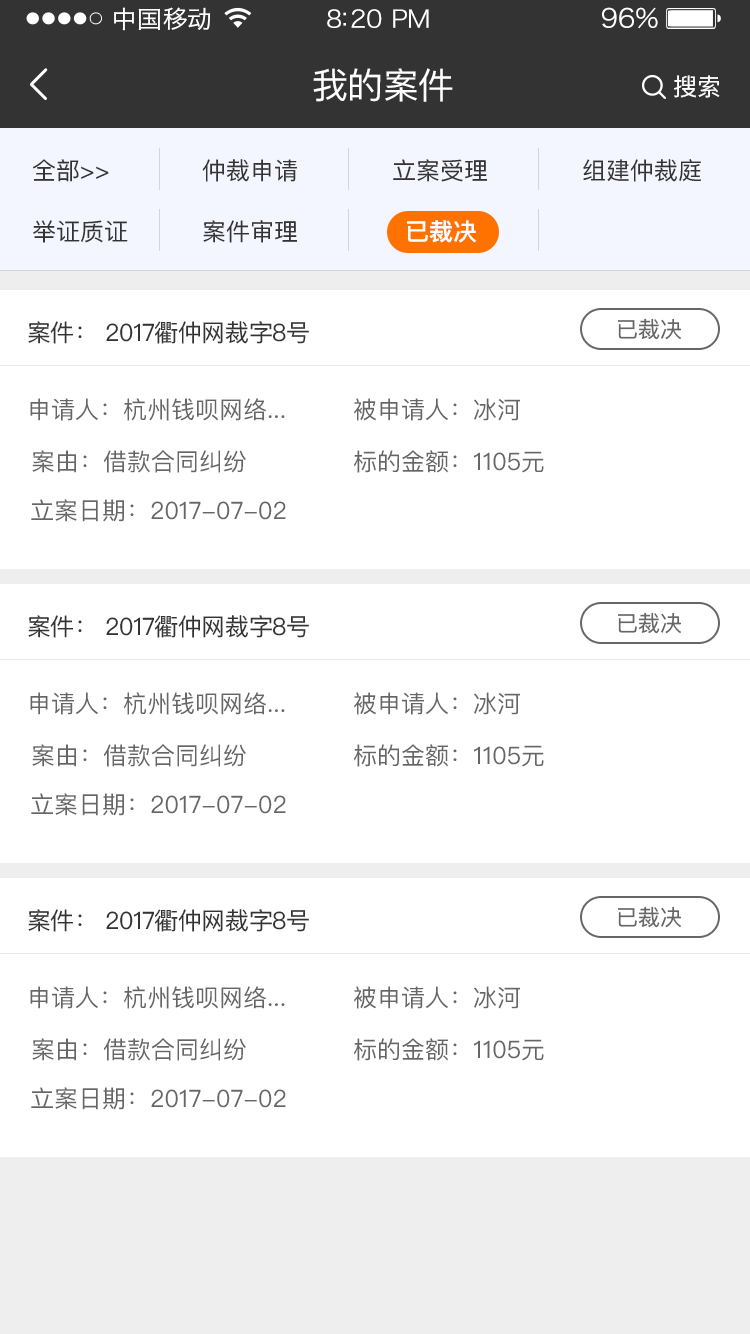
<style>
.page{position:relative;width:750px;height:1334px;background:#ffffff}
.page>*{position:absolute;margin:0}
.t1{font:24px "HiraginoSansGB-W3";letter-spacing:0.02em;color:#ffffff;scale:1.03 1}
.t2{font:24px "HiraginoSansGB-W3";letter-spacing:-0.02em;color:#ffffff;scale:1.03 1}
.t3{font:26.2px "HiraginoSansGB-W3";letter-spacing:-0.02em;color:#ffffff;scale:1.03 1}
.t4{font:36px "PingFangSC-Regular";letter-spacing:-0.02em;color:#ffffff}
.t5{font:24px "PingFangSC-Regular";letter-spacing:-0.02em;color:#ffffff}
.t6{font:24px "PingFangSC-Regular";color:#333333}
.t7{font:24px "PingFangSC-Semibold";color:#ffffff}
.t8{font:22px "PingFangSC-Regular";color:#666666}
.t9{font:24px "PingFangSC-Regular";letter-spacing:-0.02em;color:#333333}
.t10{font:24px "PingFangSC-Regular";color:#666666}
</style>
<div class="page">
<p class="t1" style="left:114px;top:7px;width:97px;height:24px">中国移动</p>
<p class="t2" style="left:327px;top:9px;width:102px;height:19px">8:20 PM</p>
<p class="t3" style="left:602px;top:7px;width:56px;height:22px">96%</p>
<p class="t4" style="left:313px;top:68px;width:140px;height:34px">我的案件</p>
<p class="t5" style="left:674px;top:75px;width:46px;height:23px">搜索</p>
<p class="t6" style="left:32px;top:159px;width:77px;height:23px">全部&gt;&gt;</p>
<p class="t6" style="left:202px;top:159px;width:95px;height:23px">仲裁申请</p>
<p class="t6" style="left:393px;top:159px;width:94px;height:23px">立案受理</p>
<p class="t6" style="left:583px;top:159px;width:118px;height:23px">组建仲裁庭</p>
<p class="t6" style="left:33px;top:220px;width:95px;height:23px">举证质证</p>
<p class="t6" style="left:203px;top:220px;width:94px;height:23px">案件审理</p>
<p class="t7" style="left:407px;top:220px;width:70px;height:23px">已裁决</p>
<p class="t8" style="left:618px;top:318px;width:64px;height:22px">已裁决</p>
<p class="t9" style="left:28px;top:321px;width:281px;height:23px">案件： 2017衢仲网裁字8号</p>
<p class="t10" style="left:30px;top:398px;width:255px;height:23px">申请人：杭州钱呗网络...</p>
<p class="t10" style="left:354px;top:398px;width:166px;height:23px">被申请人：冰河</p>
<p class="t10" style="left:32px;top:450px;width:214px;height:23px">案由：借款合同纠纷</p>
<p class="t10" style="left:354px;top:450px;width:190px;height:23px">标的金额：1105元</p>
<p class="t10" style="left:31px;top:499px;width:255px;height:23px">立案日期：2017-07-02</p>
<p class="t9" style="left:28px;top:615px;width:281px;height:23px">案件： 2017衢仲网裁字8号</p>
<p class="t8" style="left:618px;top:612px;width:64px;height:22px">已裁决</p>
<p class="t10" style="left:30px;top:692px;width:255px;height:23px">申请人：杭州钱呗网络...</p>
<p class="t10" style="left:354px;top:692px;width:166px;height:23px">被申请人：冰河</p>
<p class="t10" style="left:32px;top:744px;width:214px;height:23px">案由：借款合同纠纷</p>
<p class="t10" style="left:354px;top:744px;width:190px;height:23px">标的金额：1105元</p>
<p class="t10" style="left:31px;top:793px;width:255px;height:23px">立案日期：2017-07-02</p>
<p class="t9" style="left:28px;top:909px;width:281px;height:23px">案件： 2017衢仲网裁字8号</p>
<p class="t8" style="left:618px;top:906px;width:64px;height:22px">已裁决</p>
<p class="t10" style="left:30px;top:986px;width:255px;height:23px">申请人：杭州钱呗网络...</p>
<p class="t10" style="left:354px;top:986px;width:166px;height:23px">被申请人：冰河</p>
<p class="t10" style="left:32px;top:1038px;width:214px;height:23px">案由：借款合同纠纷</p>
<p class="t10" style="left:354px;top:1038px;width:190px;height:23px">标的金额：1105元</p>
<p class="t10" style="left:31px;top:1087px;width:255px;height:23px">立案日期：2017-07-02</p>
</div>
